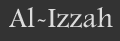
<style>
.page{position:relative;width:120px;height:41px;background:#333333}
.page>*{position:absolute;margin:0}
.t1{font:28.8px "FootlightMTLight";color:#dcdcdc;scale:1.03 1}
</style>
<div class="page">
<p class="t1" style="left:9px;top:7px;width:104px;height:21px">Al-Izzah</p>
</div>
